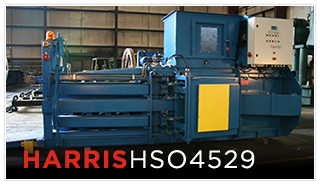
<style>
.page{position:relative;width:320px;height:185px}
.page>*{position:absolute;margin:0}
.t1{font:25px "GothamBook";letter-spacing:0.05em;color:#ffffff;text-transform:uppercase}
.t2{font:25px "GothamBold";letter-spacing:0.05em;color:#dc291e;text-transform:uppercase}
</style>
<div class="page">
<p class="t1" style="left:24px;top:150px;width:231px;height:19px"><span class="t2">Harris</span>HSO4529</p>
</div>
